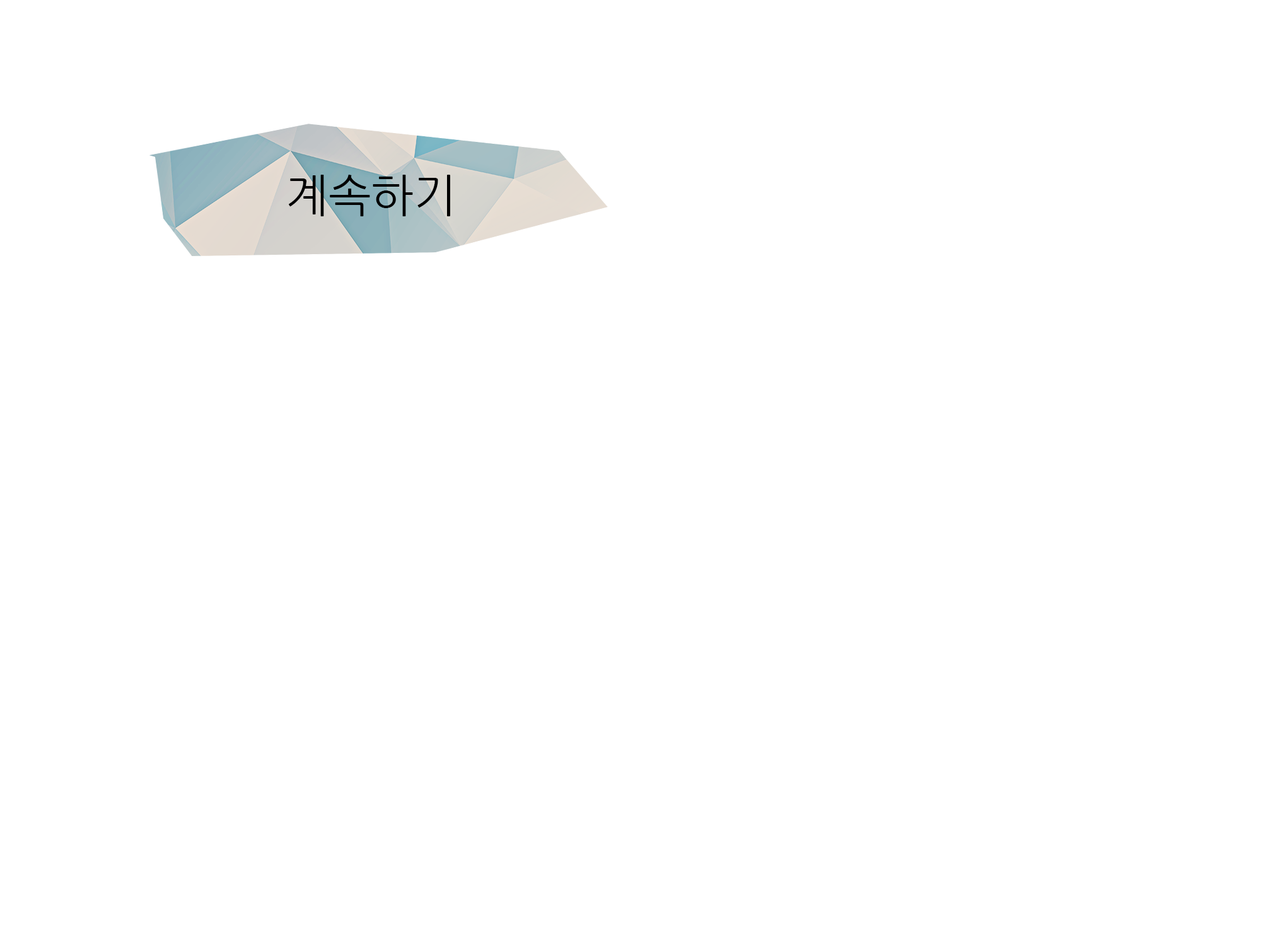
<style>
.page{position:relative;width:1261px;height:946px;background:#ffffff}
.page>*{position:absolute;margin:0}
.t1{font:45.4px "NanumGothic";color:#000000}
</style>
<div class="page">
<p class="t1" style="left:289px;top:175px;width:161px;height:41px">계속하기</p>
</div>
